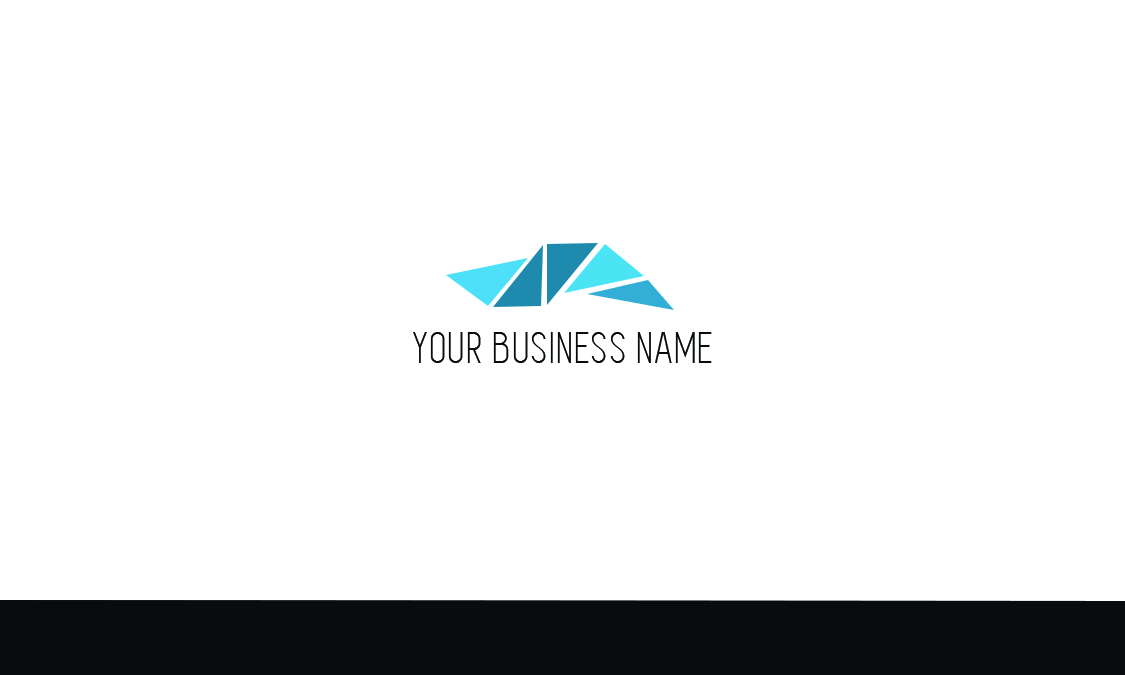
<style>
.page{position:relative;width:1125px;height:675px;background:#ffffff}
.page>*{position:absolute;margin:0}
.t1{font:45.8px "Simplifica";letter-spacing:0.045em;color:#090b0c}
</style>
<div class="page">
<p class="t1" style="left:413px;top:332px;width:299px;height:31px">YOUR BUSINESS NAME</p>
</div>
